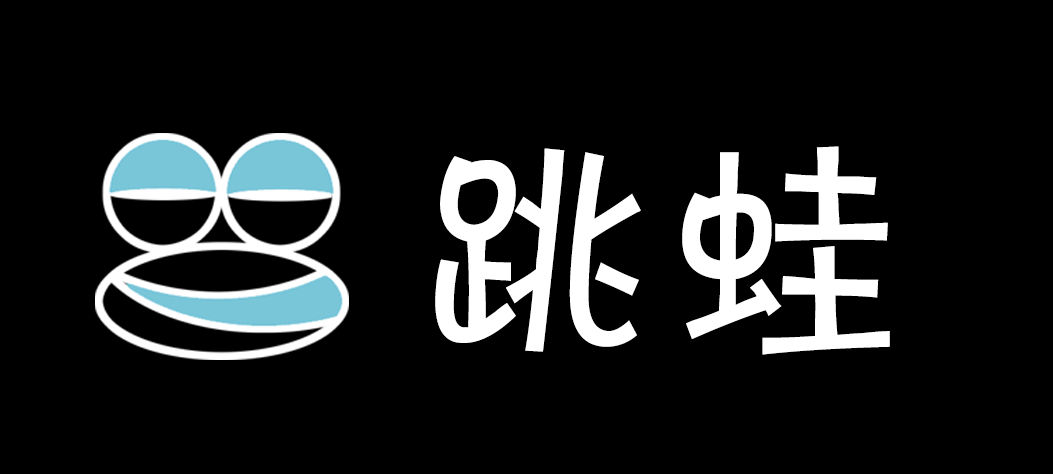
<style>
.page{position:relative;width:1053px;height:474px;background:#000000}
.page>*{position:absolute;margin:0}
.t1{font:247.5px "FZKATJW--GB1-0";color:#ffffff}
</style>
<div class="page">
<p class="t1" style="left:435px;top:146px;width:455px;height:209px">跳蛙</p>
</div>
